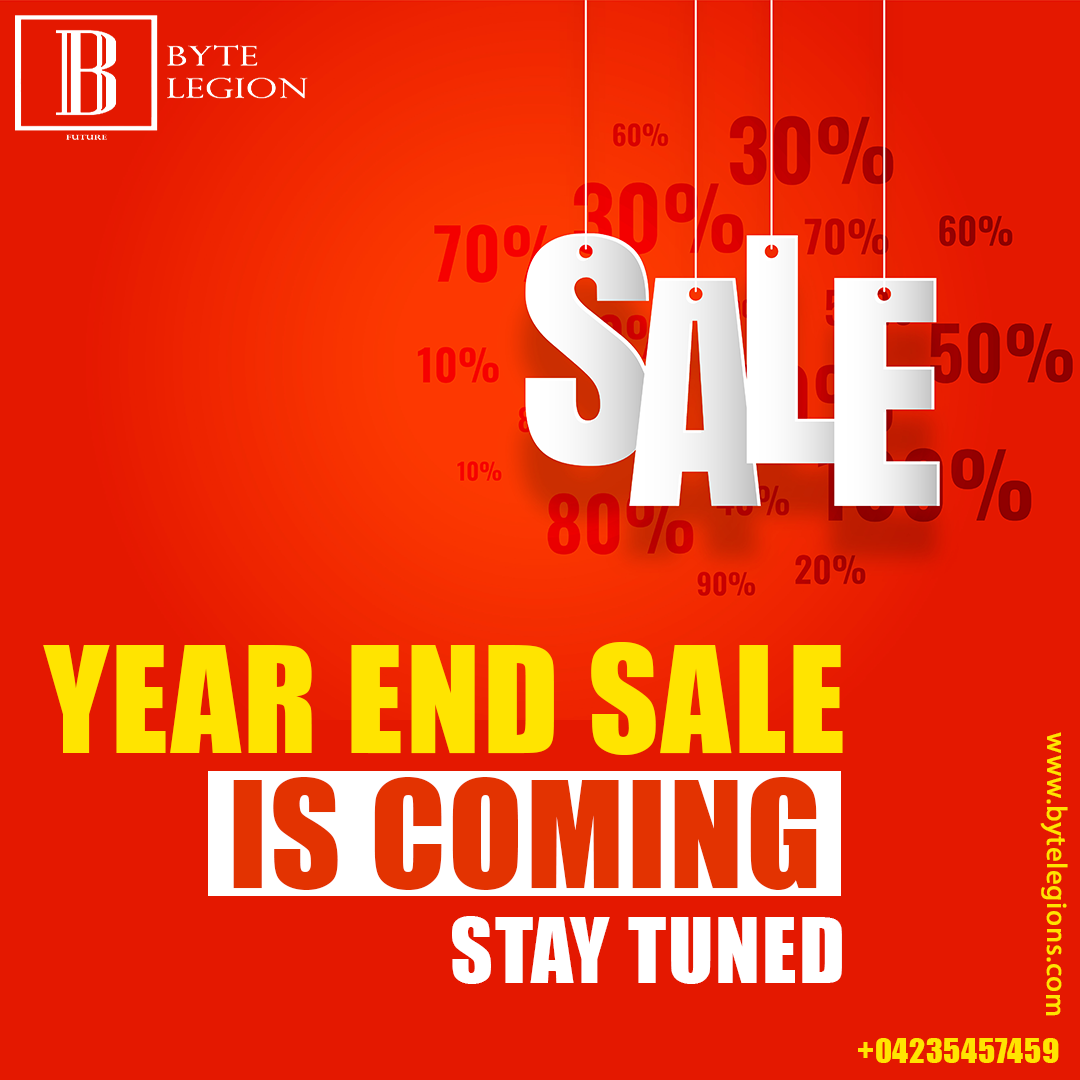
<style>
.page{position:relative;width:1080px;height:1080px;background:#e41800}
.page>*{position:absolute;margin:0}
.t1{font:136.7px/135px "Impact";letter-spacing:0.02em;color:#ffe400;text-transform:uppercase}
.t2{font:136.7px/135px "Impact";letter-spacing:0.02em;color:#e33301;text-transform:uppercase}
.t3{font:28px "MyriadPro-Regular";letter-spacing:0.02em;color:#ffe400;font-weight:bold}
.t4{font:83.4px "Impact";letter-spacing:0.02em;color:#ffffff;text-transform:uppercase}
.t5{font:32px "Impact";letter-spacing:0.02em;color:#ffe400}
</style>
<div class="page">
<p class="t1" style="left:43px;top:642px;width:800px;height:248px;text-align:right">Year End Sale<br><span class="t2">is coming</span></p>
<p class="t3" style="left:1040px;top:732px;width:28px;height:284px;rotate:90deg">www.bytelegions.com</p>
<p class="t4" style="left:452px;top:916px;width:390px;height:68px">stay tuned</p>
<p class="t5" style="left:858px;top:1038px;width:201px;height:25px">+04235457459</p>
</div>
